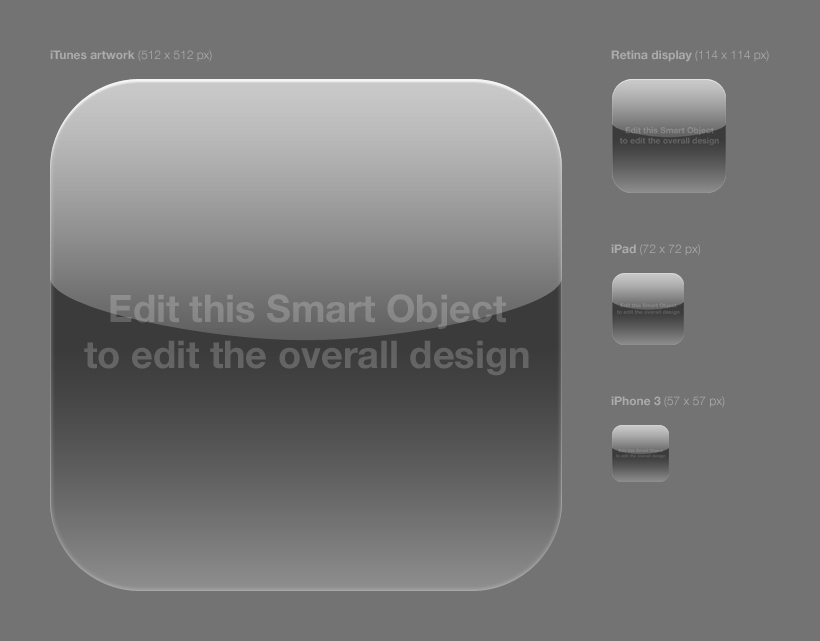
<style>
.page{position:relative;width:820px;height:641px;background:#737373}
.page>*{position:absolute;margin:0}
.t1{font:12px "HelveticaNeue-Bold";color:#ababab}
.t2{font:12px "HelveticaNeue-Light";color:#ababab}
</style>
<div class="page">
<p class="t1" style="left:50px;top:50px;width:162px;height:12px">iTunes artwork<span class="t2"> (512 x 512 px)</span></p>
<p class="t1" style="left:611px;top:50px;width:158px;height:12px">Retina display<span class="t2"> (114 x 114 px)</span></p>
<p class="t2" style="left:611px;top:244px;width:89px;height:12px"><span class="t1">iPad</span> (72 x 72 px)</p>
<p class="t2" style="left:611px;top:396px;width:114px;height:12px"><span class="t1">iPhone 3</span> (57 x 57 px)</p>
</div>
